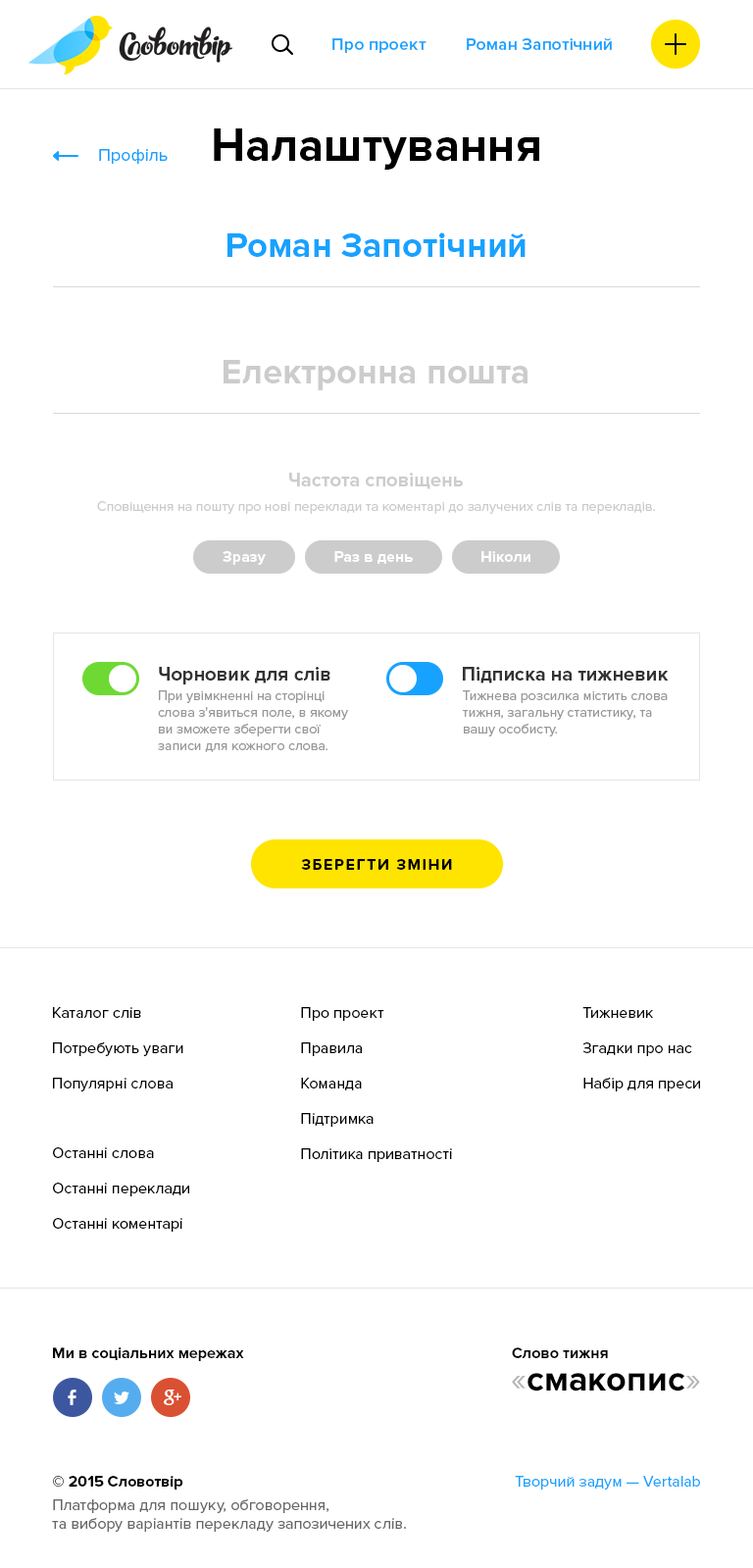
<style>
.page{position:relative;width:753px;height:1568px;background:#ffffff}
.page>*{position:absolute;margin:0}
.t1{font:17.7px "ProximaNova-Semibold";color:#17a2ff}
.t2{font:47.1px "ProximaNova-Bold";color:#000000}
.t3{font:17.7px "ProximaNova-Regular";color:#17a2ff}
.t4{font:35.3px "ProximaNova-Bold";color:#17a2ff}
.t5{font:35.3px "ProximaNova-Bold";color:#cccccc}
.t6{font:19.6px "ProximaNova-Bold";color:#cccccc}
.t7{font:13.7px "ProximaNova-Regular";color:#cccccc}
.t8{font:15.7px "ProximaNova-Bold";color:#ffffff}
.t9{font:19.6px "ProximaNova-Bold";color:#333333}
.t10{font:13.7px "ProximaNova-Regular";color:#999999}
.t11{font:15.7px "ProximaNova-Bold";letter-spacing:0.1em;color:#000000;text-transform:uppercase}
.t12{font:15.7px/35.3px "ProximaNova-Regular";color:#000000}
.t13{font:15.7px/35.3px "ProximaNova-Regular";color:#010101}
.t14{font:15.7px "ProximaNova-Bold";color:#010101}
.t15{font:35.3px "ProximaNova-Bold";color:#000000}
.t16{font:35.3px "ProximaNova-Regular";color:#b3b3b3}
.t17{font:15.7px "ProximaNova-Regular";color:#666666}
.t18{font:15.7px/21.6px "ProximaNova-Bold";color:#000000}
.t19{font:15.7px/23.5px "ProximaNova-Regular";color:#666666}
.t20{font:15.7px "ProximaNova-Regular";color:#17a2ff}
</style>
<div class="page">
<p class="t1" style="left:332px;top:38px;width:95px;height:15px">Про проект</p>
<p class="t1" style="left:467px;top:38px;width:145px;height:12px">Роман Запотічний</p>
<p class="t2" style="left:214px;top:128px;width:325px;height:42px">Налаштування</p>
<p class="t3" style="left:99px;top:149px;width:69px;height:15px">Профіль</p>
<p class="t4" style="left:228px;top:232px;width:298px;height:25px">Роман Запотічний</p>
<p class="t5" style="left:224px;top:360px;width:304px;height:30px">Електронна пошта</p>
<p class="t6" style="left:289px;top:473px;width:174px;height:16px">Частота сповіщень</p>
<p class="t7" style="left:97px;top:501px;width:558px;height:13px">Сповіщення на пошту про нові переклади та коментарі до залучених слів та перекладів.</p>
<p class="t8" style="left:223px;top:551px;width:43px;height:14px">Зразу</p>
<p class="t8" style="left:334px;top:551px;width:79px;height:13px">Раз в день</p>
<p class="t8" style="left:481px;top:551px;width:50px;height:11px">Ніколи</p>
<p class="t9" style="left:159px;top:667px;width:171px;height:17px">Чорновик для слів</p>
<p class="t9" style="left:463px;top:667px;width:206px;height:16px">Підписка на тижневик</p>
<p class="t10" style="left:158px;top:690px;width:190px;height:62px">При увімкненні на сторінці<br>слова з'явиться поле, в якому<br>ви зможете зберегти свої<br>записи для кожного слова.</p>
<p class="t10" style="left:463px;top:690px;width:205px;height:46px">Тижнева розсилка містить слова<br>тижня, загальну статистику, та<br>вашу особисту.</p>
<p class="t11" style="left:301px;top:859px;width:151px;height:11px">Зберегти зміни</p>
<p class="t12" style="left:53px;top:1007px;width:130px;height:84px">Каталог слів<br>Потребують уваги<br>Популярні слова</p>
<p class="t12" style="left:301px;top:1007px;width:151px;height:155px">Про проект<br>Правила<br>Команда<br>Підтримка<br>Політика приватності</p>
<p class="t13" style="left:582px;top:1007px;width:118px;height:84px">Тижневик<br>Згадки про нас<br>Набір для преси</p>
<p class="t12" style="left:53px;top:1147px;width:136px;height:85px">Останні слова<br>Останні переклади<br>Останні коментарі</p>
<p class="t14" style="left:53px;top:1347px;width:191px;height:14px">Ми в соціальних мережах</p>
<p class="t14" style="left:512px;top:1347px;width:96px;height:11px">Слово тижня</p>
<p class="t15" style="left:512px;top:1373px;width:188px;height:18px"><span class="t16">«</span>смакопис<span class="t16">»</span></p>
<p class="t17" style="left:52px;top:1476px;width:354px;height:56px"><span class="t18">© 2015 Словотвір<br></span><span class="t19">Платформа для пошуку, обговорення,<br></span>та вибору варіантів перекладу запозичених слів.</p>
<p class="t20" style="left:515px;top:1476px;width:185px;height:14px">Творчий задум — Vertalab</p>
</div>
